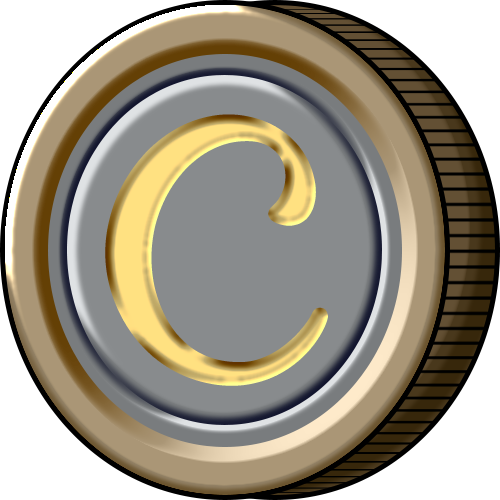
<style>
.page{position:relative;width:500px;height:500px;background:#888b8d}
.page>*{position:absolute;margin:0}
.t1{font:400px "Alisha-Regular";color:#ffe181}
</style>
<div class="page">
<p class="t1" style="left:110px;top:119px;width:213px;height:262px">C</p>
</div>
